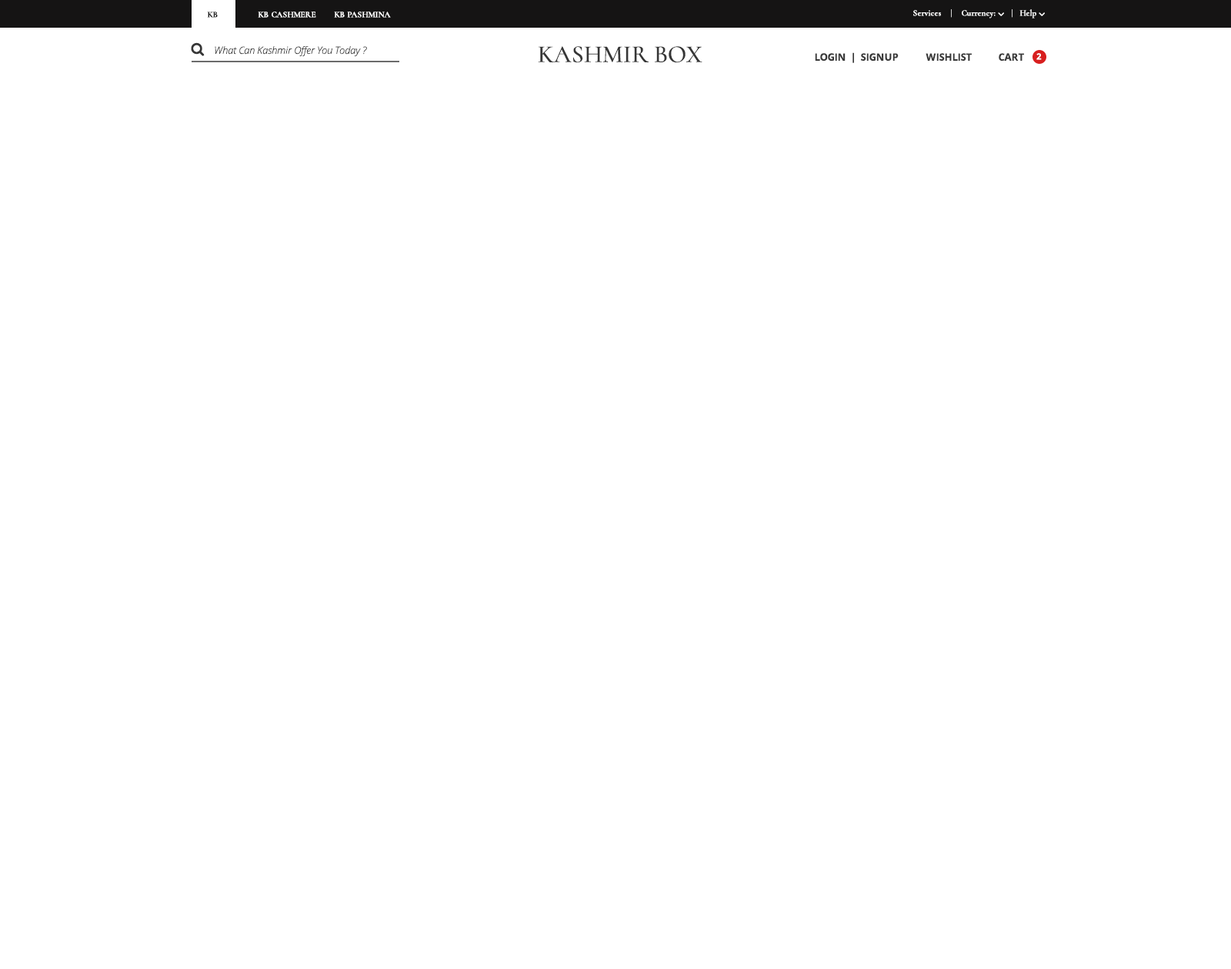
<style>
.page{position:relative;width:1231px;height:969px;background:#ffffff}
.page>*{position:absolute;margin:0}
.t1{font:8.5px "Cormorant-Bold";color:#191919;text-transform:uppercase}
.t2{font:8.5px "Cormorant-Bold";color:#ffffff;text-transform:uppercase}
.t3{font:8.5px "Cormorant-Bold";color:#ffffff}
.t4{font:10px "OpenSans-LightItalic";color:#363636}
.t5{font:24.6px "Cormorant-Medium";color:#363636;text-transform:uppercase}
.t6{font:10px "OpenSans-Bold";color:#393939;text-transform:uppercase}
.t7{font:8.5px "OpenSans-Bold";color:#ffffff}
</style>
<div class="page">
<p class="t1" style="left:207px;top:12px;width:11px;height:6px">KB</p>
<p class="t2" style="left:258px;top:12px;width:58px;height:6px">KB cashmere</p>
<p class="t2" style="left:334px;top:12px;width:57px;height:6px">KB pashmina</p>
<p class="t3" style="left:913px;top:9px;width:123px;height:9px">Services    |    Currency:       |   Help</p>
<p class="t4" style="left:215px;top:46px;width:152px;height:11px">What Can Kashmir Offer You Today ?</p>
<p class="t5" style="left:538px;top:46px;width:164px;height:17px">Kashmir Box</p>
<p class="t6" style="left:814px;top:52px;width:84px;height:11px">Login  |  Signup</p>
<p class="t6" style="left:925px;top:53px;width:46px;height:8px">Wishlist</p>
<p class="t6" style="left:998px;top:53px;width:26px;height:8px">Cart</p>
<p class="t7" style="left:1036px;top:53px;width:5px;height:7px">2</p>
</div>
